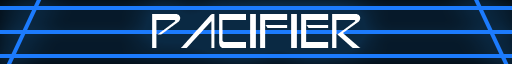
<style>
.page{position:relative;width:512px;height:64px}
.page>*{position:absolute;margin:0}
.t1{font:52px "AstronBoyRg-Regular";color:#ffffff}
</style>
<div class="page">
<p class="t1" style="left:152px;top:14px;width:209px;height:34px">PACIFIER</p>
</div>
